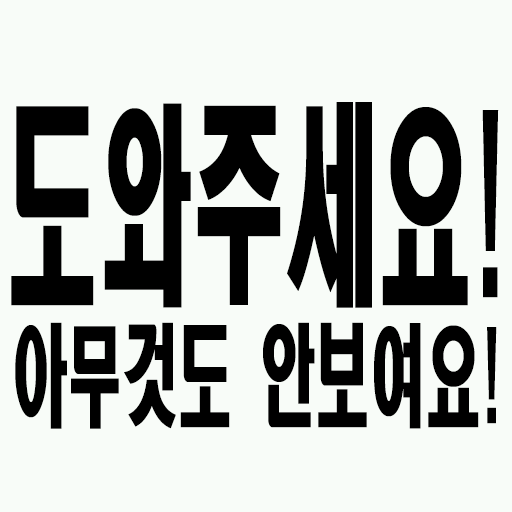
<style>
.page{position:relative;width:512px;height:512px;background:#f8fcf8}
.page>*{position:absolute;margin:0}
.t1{font:213.9px "HeadlineR-HM";color:#000000;scale:0.43 1}
.t2{font:110px "HeadlineR-HM";color:#000000;scale:0.5 1}
</style>
<div class="page">
<p class="t1" style="left:11px;top:102px;width:488px;height:206px">도와주세요!</p>
<p class="t2" style="left:15px;top:322px;width:482px;height:107px">아무것도 안보여요!</p>
</div>
